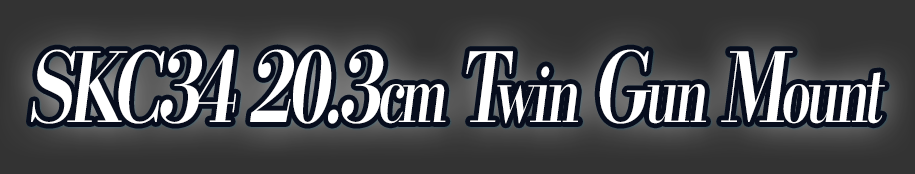
<style>
.page{position:relative;width:915px;height:174px;background:#333333}
.page>*{position:absolute;margin:0}
.t1{font:96px "KochoStd-Heavy";letter-spacing:-0.08em;color:#ffffff;font-style:italic;scale:0.72 1}
.t2{font:76.8px "KochoStd-Heavy";letter-spacing:-0.08em;color:#ffffff;font-style:italic;scale:0.72 1}
</style>
<div class="page">
<p class="t1" style="left:31px;top:49px;width:854px;height:75px">SKC34 20.3<span class="t2">cm</span> T<span class="t2">win</span> G<span class="t2">un</span> M<span class="t2">ount</span></p>
</div>
